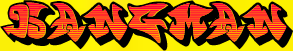
<style>
.page{position:relative;width:293px;height:51px;background:#000000}
.page>*{position:absolute;margin:0}
.t1{font:48px "graffonti.3Ddrop";color:#000000}
.t2{font:48px "Graffonti.atomicbomb"}
.t3{font:48px "graffonti.gradient.fill";color:#ffa200}
</style>
<div class="page">
<p class="t1" style="left:0px;top:0px;width:293px;height:51px">hangman</p>
<p class="t2" style="left:2px;top:2px;width:285px;height:41px">hangman</p>
<p class="t3" style="left:4px;top:3px;width:283px;height:40px">hangman</p>
</div>
